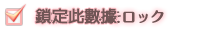
<style>
.page{position:relative;width:218px;height:30px;background:#ffffff}
.page>*{position:absolute;margin:0}
.t1{font:16px "AdobeFanHeitiStd-Bold";color:#7c6a6a;font-weight:bold}
</style>
<div class="page">
<p class="t1" style="left:35px;top:8px;width:82px;height:16px">鎖定此數據</p>
</div>
